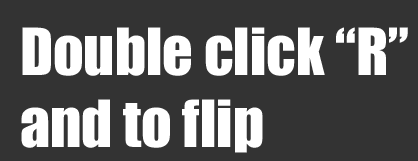
<style>
.page{position:relative;width:418px;height:161px;background:#333333}
.page>*{position:absolute;margin:0}
.t1{font:60px "Impact";color:#ffffff}
</style>
<div class="page">
<p class="t1" style="left:21px;top:27px;width:387px;height:126px">Double click “R”<br>and to flip</p>
</div>
